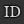
<style>
.page{position:relative;width:24px;height:24px;background:#333333}
.page>*{position:absolute;margin:0}
.t1{font:14.7px "Georgia";color:#d3d3d3}
</style>
<div class="page">
<p class="t1" style="left:4px;top:6px;width:17px;height:11px">ID</p>
</div>
